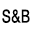
<style>
.page{position:relative;width:32px;height:32px;background:#ffffff}
.page>*{position:absolute;margin:0}
.t1{font:16.8px "MonospaceTypewriter";color:#010101}
.t2{font:16.8px "MonospaceTypewriter";letter-spacing:-0.02em;color:#010101}
.t3{font:16.8px "MonospaceTypewriter";letter-spacing:0.02em;color:#010101}
</style>
<div class="page">
<p class="t1" style="left:2px;top:9px;width:28px;height:14px">S<span class="t2">&amp;</span><span class="t3">B</span></p>
</div>
